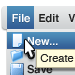
<style>
.page{position:relative;width:75px;height:75px}
.page>*{position:absolute;margin:0}
.t1{font:11px "Helvetica-Bold";color:#ffffff}
.t2{font:11px "Helvetica";color:#222222}
</style>
<div class="page">
<p class="t1" style="left:12px;top:14px;width:18px;height:9px">File</p>
<p class="t1" style="left:27px;top:37px;width:31px;height:9px">New...</p>
<p class="t2" style="left:40px;top:54px;width:34px;height:8px">Create</p>
</div>
